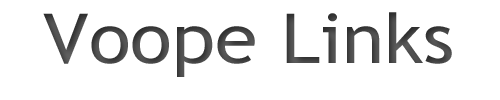
<style>
.page{position:relative;width:500px;height:100px;background:#ffffff}
.page>*{position:absolute;margin:0}
.t1{font:68.8px "TrebuchetMS";color:#474747;scale:1.13 1}
</style>
<div class="page">
<p class="t1" style="left:43px;top:12px;width:409px;height:65px">Voope Links</p>
</div>
